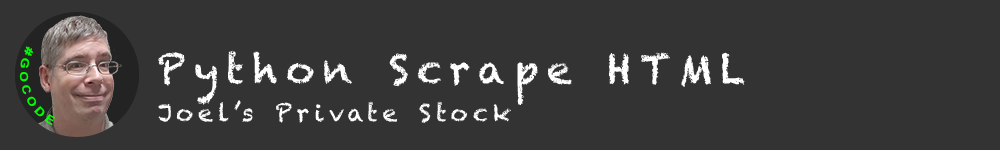
<style>
.page{position:relative;width:1000px;height:150px;background:#333333}
.page>*{position:absolute;margin:0}
.t1{font:11.2px "Arial-BoldMT";letter-spacing:0.2em;color:#00ff00}
.t2{font:40px "Chalkduster";letter-spacing:0.2em;color:#ffffff}
.t3{font:24px "Chalkduster";letter-spacing:0.2em;color:#ffffff}
</style>
<div class="page">
<p class="t1" style="left:19px;top:46px;width:37px;height:80px;rotate:72deg">#GOCODE</p>
<p class="t2" style="left:158px;top:50px;width:587px;height:55px">Python Scrape HTML</p>
<p class="t3" style="left:158px;top:100px;width:353px;height:23px">Joel’s Private Stock</p>
</div>
